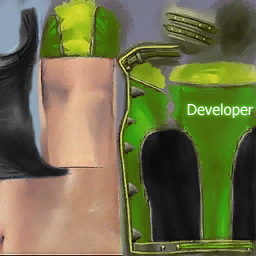
<style>
.page{position:relative;width:256px;height:256px}
.page>*{position:absolute;margin:0}
.t1{font:15px "Tahoma";color:#ffffff}
</style>
<div class="page">
<p class="t1" style="left:187px;top:103px;width:67px;height:15px">Developer</p>
</div>
